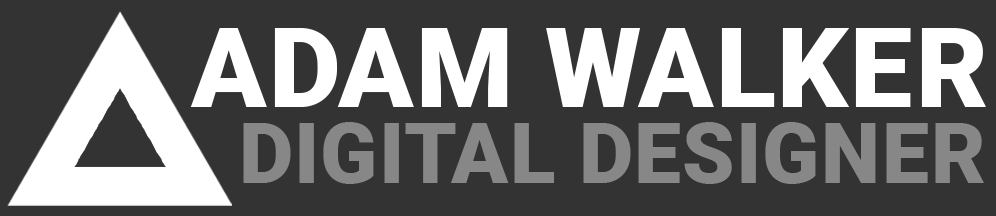
<style>
.page{position:relative;width:996px;height:216px;background:#333333}
.page>*{position:absolute;margin:0}
.t1{font:111px "Roboto-Black";letter-spacing:0.015em;color:#ffffff;text-transform:uppercase}
.t2{font:83.9px "Roboto-Black";letter-spacing:0.015em;color:#878787;text-transform:uppercase}
</style>
<div class="page">
<p class="t1" style="left:190px;top:28px;width:796px;height:79px">Adam WALKER</p>
<p class="t2" style="left:243px;top:122px;width:741px;height:62px">DIGITAL DESIGNER</p>
</div>
